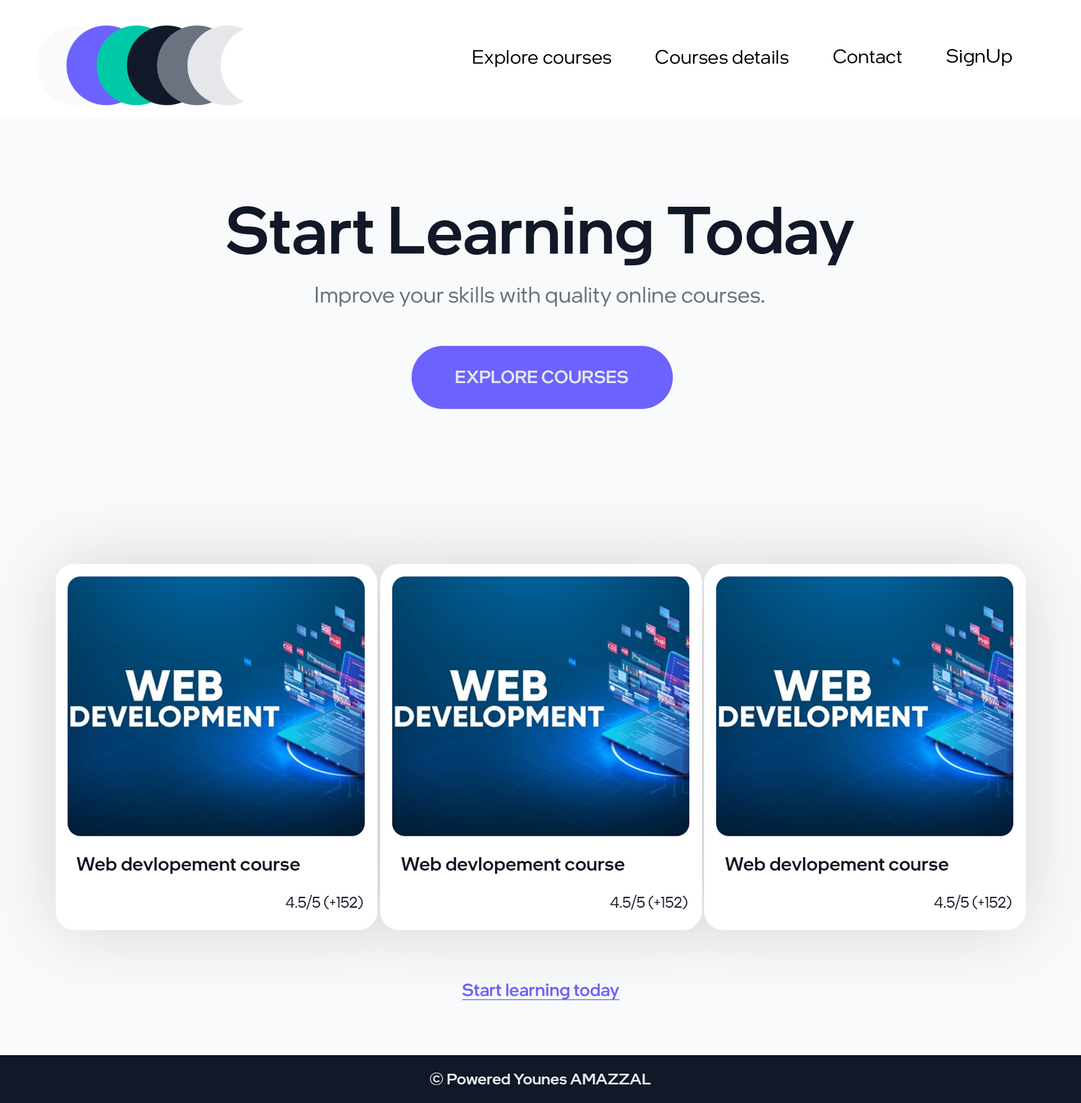
<style>
.page{position:relative;width:1081px;height:1103px;background:#f9fafb}
.page>*{position:absolute;margin:0}
.t1{font:19.7px "IntelOneDisplay-Regular";letter-spacing:0.01em;color:#000000}
.t2{font:66.1px "IntelOneDisplay-Medium";letter-spacing:0.01em;color:#111827}
.t3{font:22.5px "IntelOneDisplay-Regular";letter-spacing:0.01em;color:#6b7280}
.t4{font:17.6px "IntelOneDisplay-Medium";letter-spacing:0.01em;color:#e5e7eb;text-transform:uppercase}
.t5{font:17.6px "IntelOneDisplay-Medium";letter-spacing:0.01em;color:#6c63ff;text-decoration:underline}
.t6{font:15.8px "IntelOneDisplay-Medium";letter-spacing:0.01em;color:#e5e7eb}
</style>
<div class="page">
<p class="t1" style="left:473px;top:50px;width:139px;height:17px">Explore courses</p>
<p class="t1" style="left:656px;top:50px;width:133px;height:14px">Courses details</p>
<p class="t1" style="left:834px;top:49px;width:68px;height:15px">Contact</p>
<p class="t1" style="left:947px;top:49px;width:66px;height:17px">SignUp</p>
<p class="t2" style="left:226px;top:206px;width:628px;height:59px">Start Learning Today</p>
<p class="t3" style="left:315px;top:287px;width:449px;height:19px">Improve your skills with quality online courses.</p>
<p class="t4" style="left:456px;top:370px;width:173px;height:14px">Explore courses</p>
<p class="t5" style="left:462px;top:983px;width:158px;height:17px">Start learning today</p>
<p class="t6" style="left:430px;top:1072px;width:221px;height:13px">© Powered Younes AMAZZAL</p>
</div>
